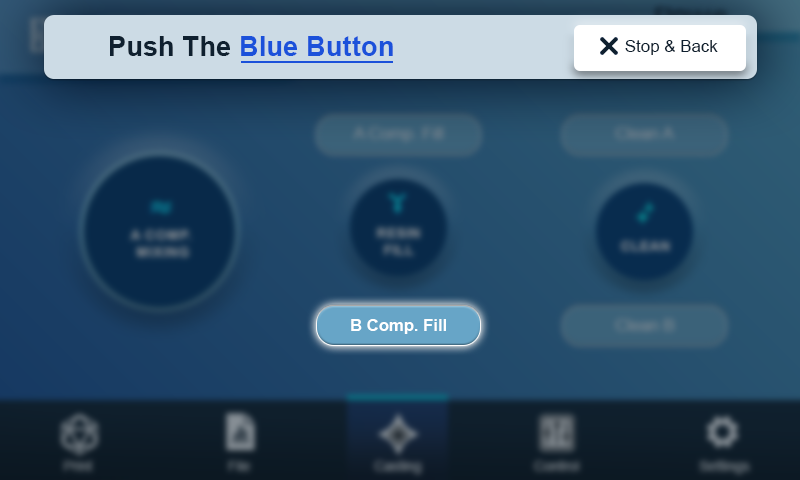
<style>
.page{position:relative;width:800px;height:480px}
.page>*{position:absolute;margin:0}
.t1{font:27.1px "Arial-BoldMT";letter-spacing:0.01em;color:#1b51da}
.t2{font:27.1px "Arial-BoldMT";letter-spacing:0.01em;color:#0f202f}
.t3{font:16.7px "ArialMT";letter-spacing:0.01em;color:#0f202f}
.t4{font:16.7px "Arial-BoldMT";color:#ffffff}
</style>
<div class="page">
<p class="t1" style="left:110px;top:36px;width:283px;height:20px"><span class="t2">Push The </span>Blue Button</p>
<p class="t3" style="left:625px;top:40px;width:93px;height:15px">Stop &amp; Back</p>
<p class="t4" style="left:351px;top:319px;width:95px;height:15px">B Comp. Fill</p>
</div>
